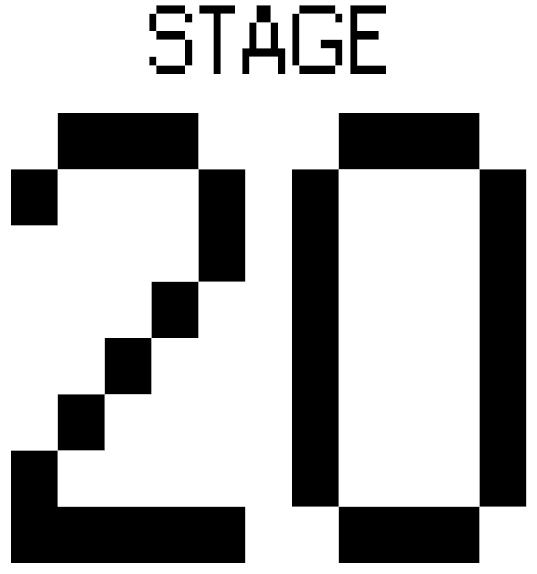
<style>
.page{position:relative;width:537px;height:574px;background:#ffffff}
.page>*{position:absolute;margin:0}
.t1{font:91.7px "Small Fonts";color:#000000}
.t2{font:600px "Small Fonts";color:#000000}
</style>
<div class="page">
<p class="t1" style="left:149px;top:5px;width:237px;height:69px">STAGE</p>
<p class="t2" style="left:11px;top:113px;width:516px;height:450px">20</p>
</div>
